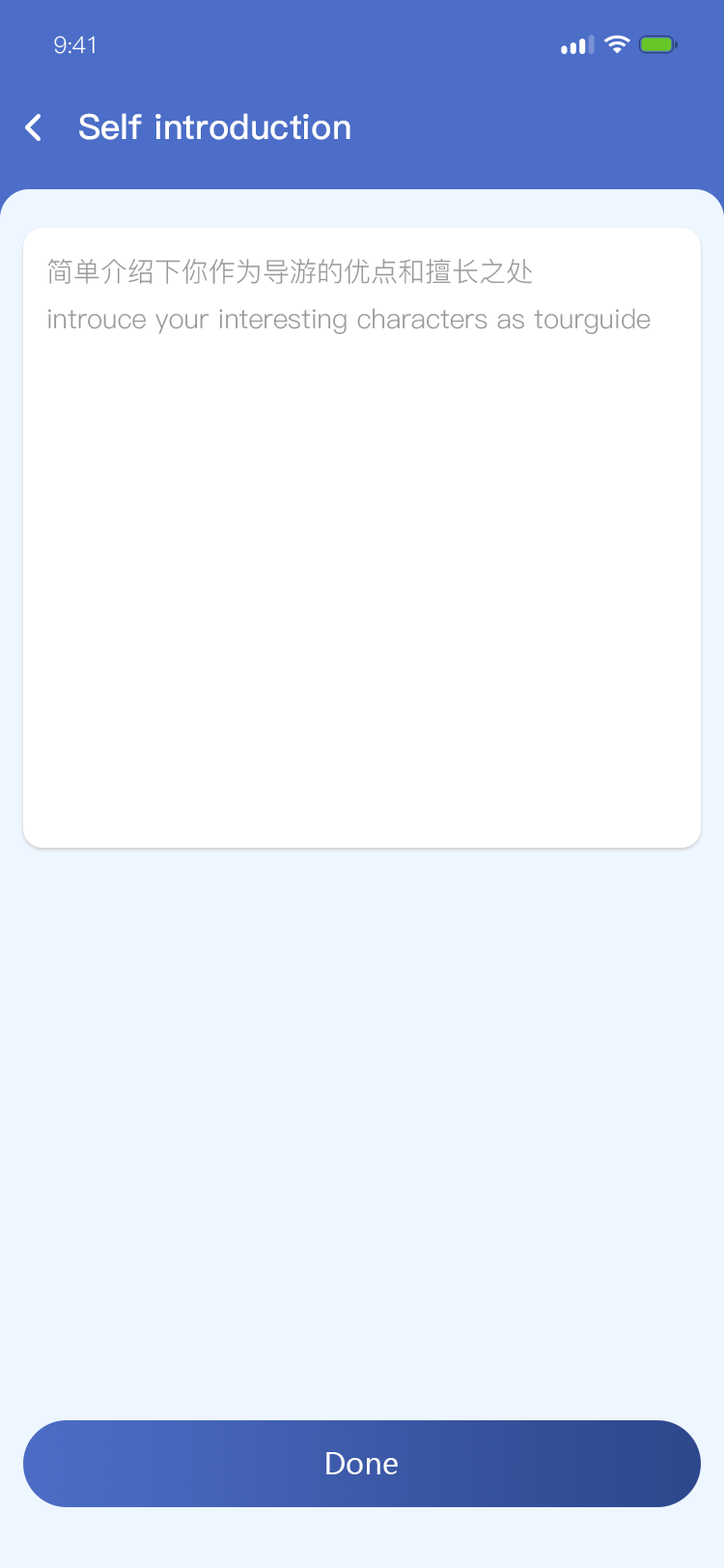
<style>
.page{position:relative;width:724px;height:1568px;background:#eef6ff}
.page>*{position:absolute;margin:0}
.t1{font:23.2px "PingFang-SC-Regular";letter-spacing:-0.025em;color:#ffffff}
.t2{font:34.8px "PingFang-SC-Bold";color:#feffff}
.t3{font:34.8px "PingFang-SC-Bold";color:#feffff;text-transform:uppercase}
.t4{font:27px "PingFang-SC-Regular";color:#999999}
.t5{font:29px "MicrosoftYaHei";color:#ffffff}
</style>
<div class="page">
<p class="t1" style="left:54px;top:36px;width:41px;height:18px">9:41</p>
<p class="t2" style="left:79px;top:113px;width:271px;height:27px"><span class="t3">s</span>elf introduction</p>
<p class="t4" style="left:47px;top:258px;width:604px;height:77px">简单介绍下你作为导游的优点和擅长之处<br>introuce your interesting characters as tourguide</p>
<p class="t5" style="left:326px;top:1452px;width:72px;height:22px">Done</p>
</div>
